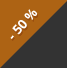
<style>
.page{position:relative;width:67px;height:68px;background:#333333}
.page>*{position:absolute;margin:0}
.t1{font:13px "OpenSans-Bold";color:#ffffff}
</style>
<div class="page">
<p class="t1" style="left:10px;top:9px;width:28px;height:30px;rotate:-49deg">- 50 %</p>
</div>
